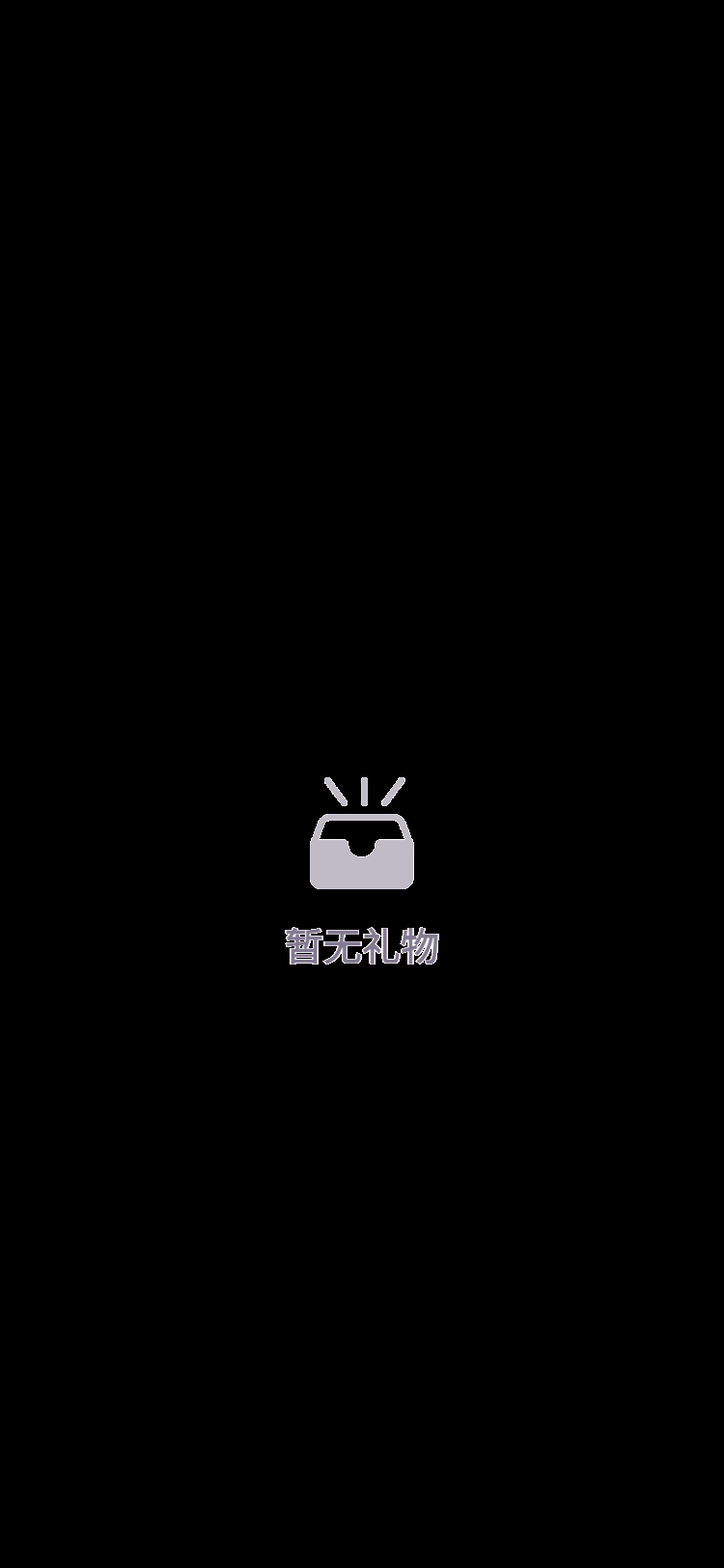
<style>
.page{position:relative;width:724px;height:1568px;background:#000000}
.page>*{position:absolute;margin:0}
.t1{font:38.6px "WebPSD-18463539-0-Regular";color:#837a91;font-weight:bold}
</style>
<div class="page">
<p class="t1" style="left:193px;top:927px;width:338px;height:39px">暂无礼物</p>
</div>
